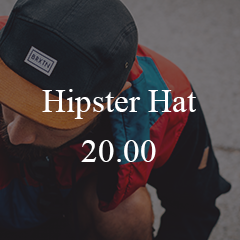
<style>
.page{position:relative;width:240px;height:240px}
.page>*{position:absolute;margin:0}
.t1{font:33.3px/50px "TimesNewRomanPSMT";color:#ffffff}
.t2{font:33.3px/50px "TimesNewRomanPSMT"}
</style>
<div class="page">
<p class="t1" style="left:42px;top:89px;width:154px;height:73px;text-align:center">Hipster Hat<br>20.00</p>
<p class="t2" style="left:73px;top:89px;width:92px;height:73px;text-align:center">T-Shirt<br>24.00</p>
</div>
